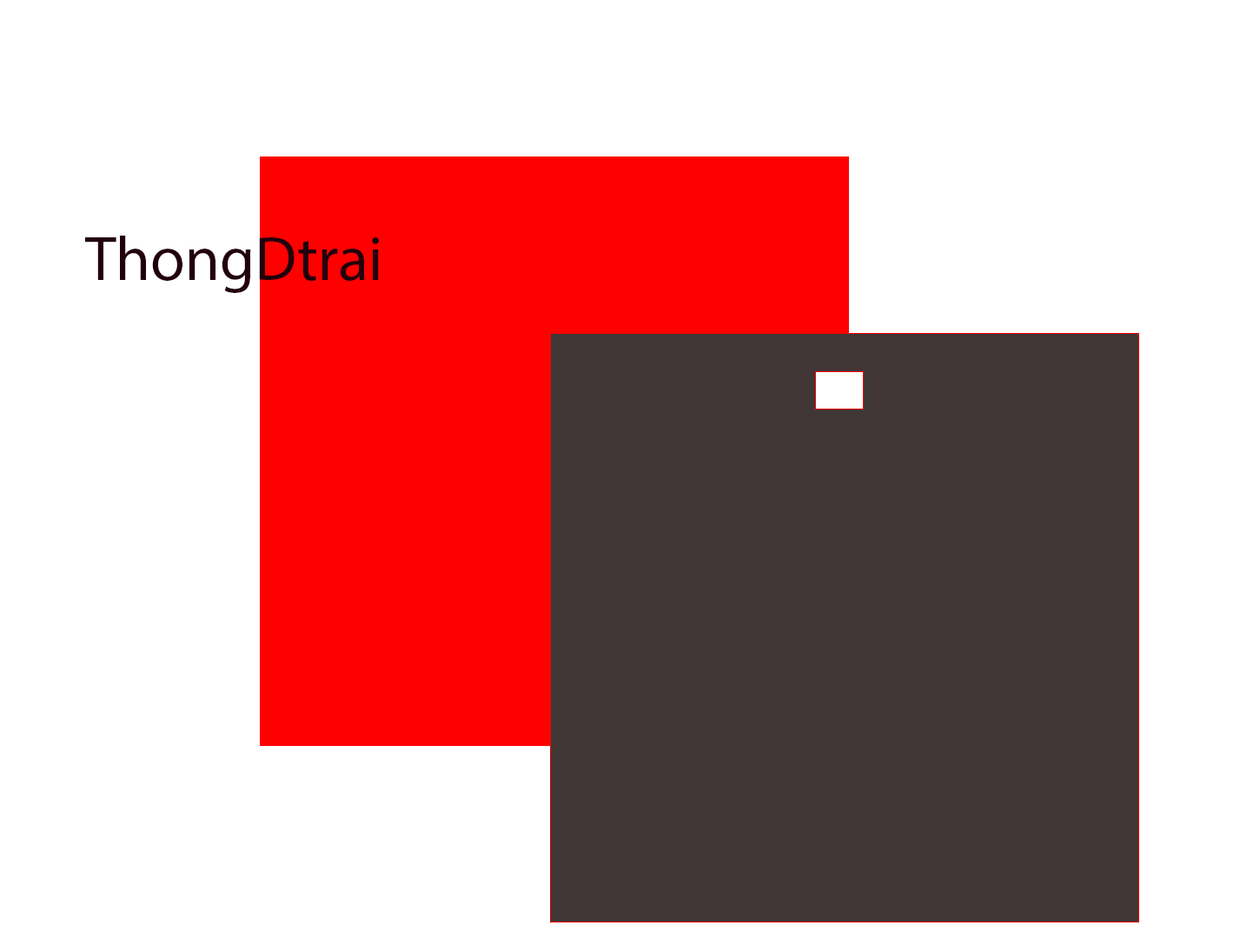
<style>
.page{position:relative;width:1253px;height:952px;background:#ffffff}
.page>*{position:absolute;margin:0}
.t1{font:62.6px "MyriadPro-Regular";color:#22000b}
</style>
<div class="page">
<p class="t1" style="left:85px;top:236px;width:294px;height:57px">ThongDtrai</p>
</div>
